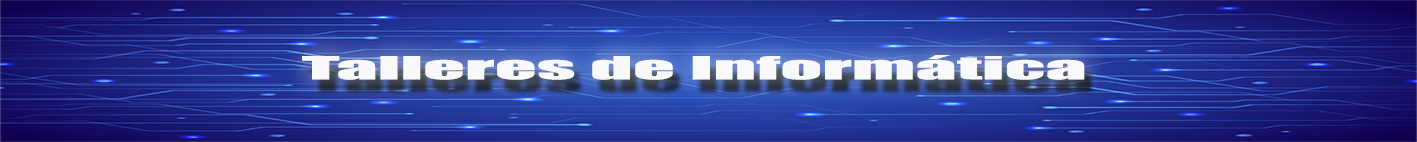
<style>
.page{position:relative;width:1417px;height:142px}
.page>*{position:absolute;margin:0}
.t1{font:29.4px "Impact";color:#e7e6f8;scale:2.81 1}
</style>
<div class="page">
<p class="t1" style="left:302px;top:55px;width:783px;height:25px">Talleres de Informática</p>
</div>
